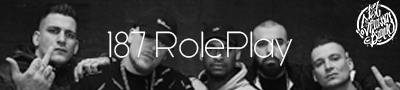
<style>
.page{position:relative;width:400px;height:90px}
.page>*{position:absolute;margin:0}
.t1{font:36px "Generica";color:#ffffff}
</style>
<div class="page">
<p class="t1" style="left:107px;top:31px;width:186px;height:35px">187 RolePlay</p>
</div>
